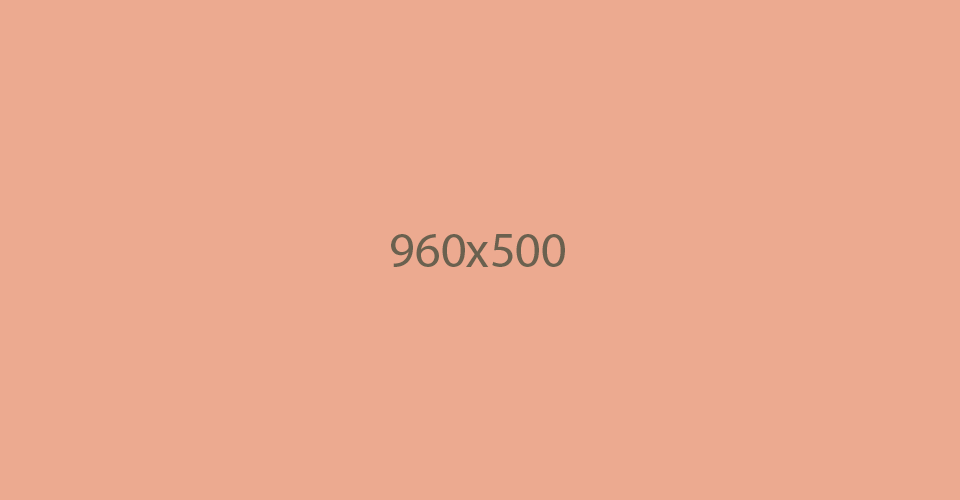
<style>
.page{position:relative;width:960px;height:500px;background:#ecaa90}
.page>*{position:absolute;margin:0}
.t1{font:49.7px "MyriadPro-Regular";color:#6a614f}
</style>
<div class="page">
<p class="t1" style="left:391px;top:234px;width:174px;height:33px">960x500</p>
</div>
